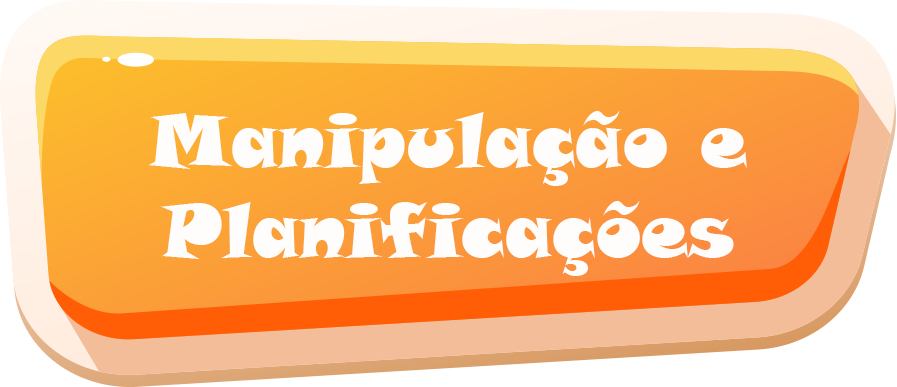
<style>
.page{position:relative;width:897px;height:387px}
.page>*{position:absolute;margin:0}
.t1{font:75px "SnapITC-Regular";color:#fefdfc}
</style>
<div class="page">
<p class="t1" style="left:148px;top:111px;width:599px;height:165px;text-align:center">Manipulação e<br>Planificações</p>
</div>
